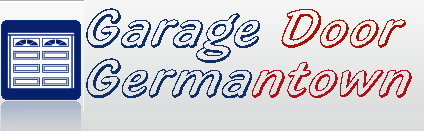
<style>
.page{position:relative;width:424px;height:131px}
.page>*{position:absolute;margin:0}
.t1{font:58px "HighlightLetPlain";color:#0f2e65}
.t2{font:58px "HighlightLetPlain";color:#a81304}
.t3{font:58px "HighlightLetPlain";color:#b20e17}
</style>
<div class="page">
<p class="t1" style="left:86px;top:8px;width:320px;height:55px">Garage <span class="t2">Door</span></p>
<p class="t1" style="left:86px;top:58px;width:326px;height:40px">Germa<span class="t3">ntown</span></p>
</div>
